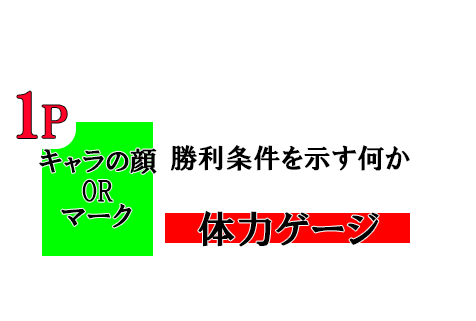
<style>
.page{position:relative;width:476px;height:321px;background:#ffffff}
.page>*{position:absolute;margin:0}
.t1{font:62.2px "HGSMinchoE";color:#ff0029;font-variant:small-caps}
.t2{font:27.8px "HGPSoeiPresenceEB";color:#000000;font-variant:small-caps}
.t3{font:38.9px "HGPSoeiPresenceEB";color:#000000;font-variant:small-caps}
</style>
<div class="page">
<p class="t1" style="left:17px;top:91px;width:50px;height:47px">1p</p>
<p class="t2" style="left:39px;top:148px;width:118px;height:26px">キャラの顔</p>
<p class="t2" style="left:170px;top:145px;width:240px;height:26px">勝利条件を示す何か</p>
<p class="t2" style="left:82px;top:179px;width:31px;height:23px">OR</p>
<p class="t2" style="left:61px;top:204px;width:71px;height:24px">マーク</p>
<p class="t3" style="left:198px;top:210px;width:181px;height:37px">体力ゲージ</p>
</div>
